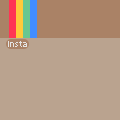
<style>
.page{position:relative;width:120px;height:120px;background:#baa38f}
.page>*{position:absolute;margin:0}
.t1{font:9px "TrebuchetMS";color:#e5e5e5}
</style>
<div class="page">
<p class="t1" style="left:8px;top:41px;width:19px;height:6px">Insta</p>
</div>
